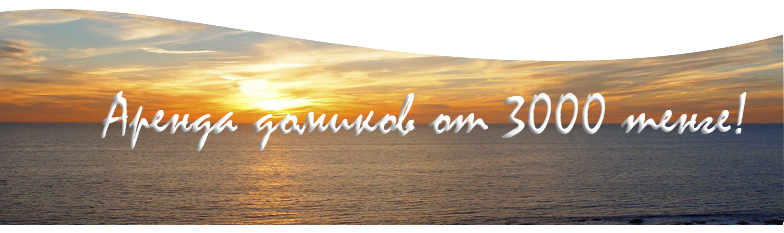
<style>
.page{position:relative;width:784px;height:233px}
.page>*{position:absolute;margin:0}
.t1{font:60px "Mistral";color:#fdfefe}
</style>
<div class="page">
<p class="t1" style="left:101px;top:91px;width:646px;height:60px">Аренда домиков от 3000 тенге!</p>
</div>
